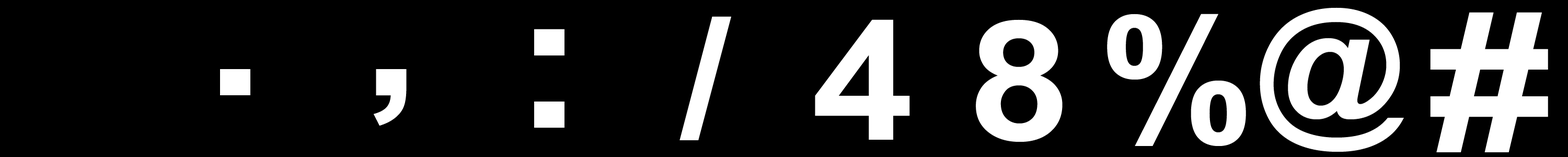
<style>
.page{position:relative;width:1568px;height:157px;background:#000000}
.page>*{position:absolute;margin:0}
.t1{font:166.1px "Arial-BoldMT";color:#ffffff;scale:1.1 1}
.t2{font:173.7px "Arial-BoldMT";color:#ffffff}
.t3{font:152.8px "Arial-BoldMT";color:#ffffff}
.t4{font:188.6px "Arial-BoldMT";color:#ffffff;scale:1.16 1}
</style>
<div class="page">
<p class="t1" style="left:679px;top:16px;width:52px;height:124px">/</p>
<p class="t2" style="left:1107px;top:14px;width:139px;height:132px">%</p>
<p class="t3" style="left:1260px;top:7px;width:144px;height:145px">@</p>
<p class="t4" style="left:1430px;top:12px;width:118px;height:140px">#</p>
<p class="t4" style="left:534px;top:29px;width:30px;height:99px">:</p>
<p class="t1" style="left:815px;top:19px;width:95px;height:121px">4</p>
<p class="t1" style="left:976px;top:19px;width:87px;height:123px">8</p>
<p class="t4" style="left:373px;top:69px;width:34px;height:56px">,</p>
</div>
